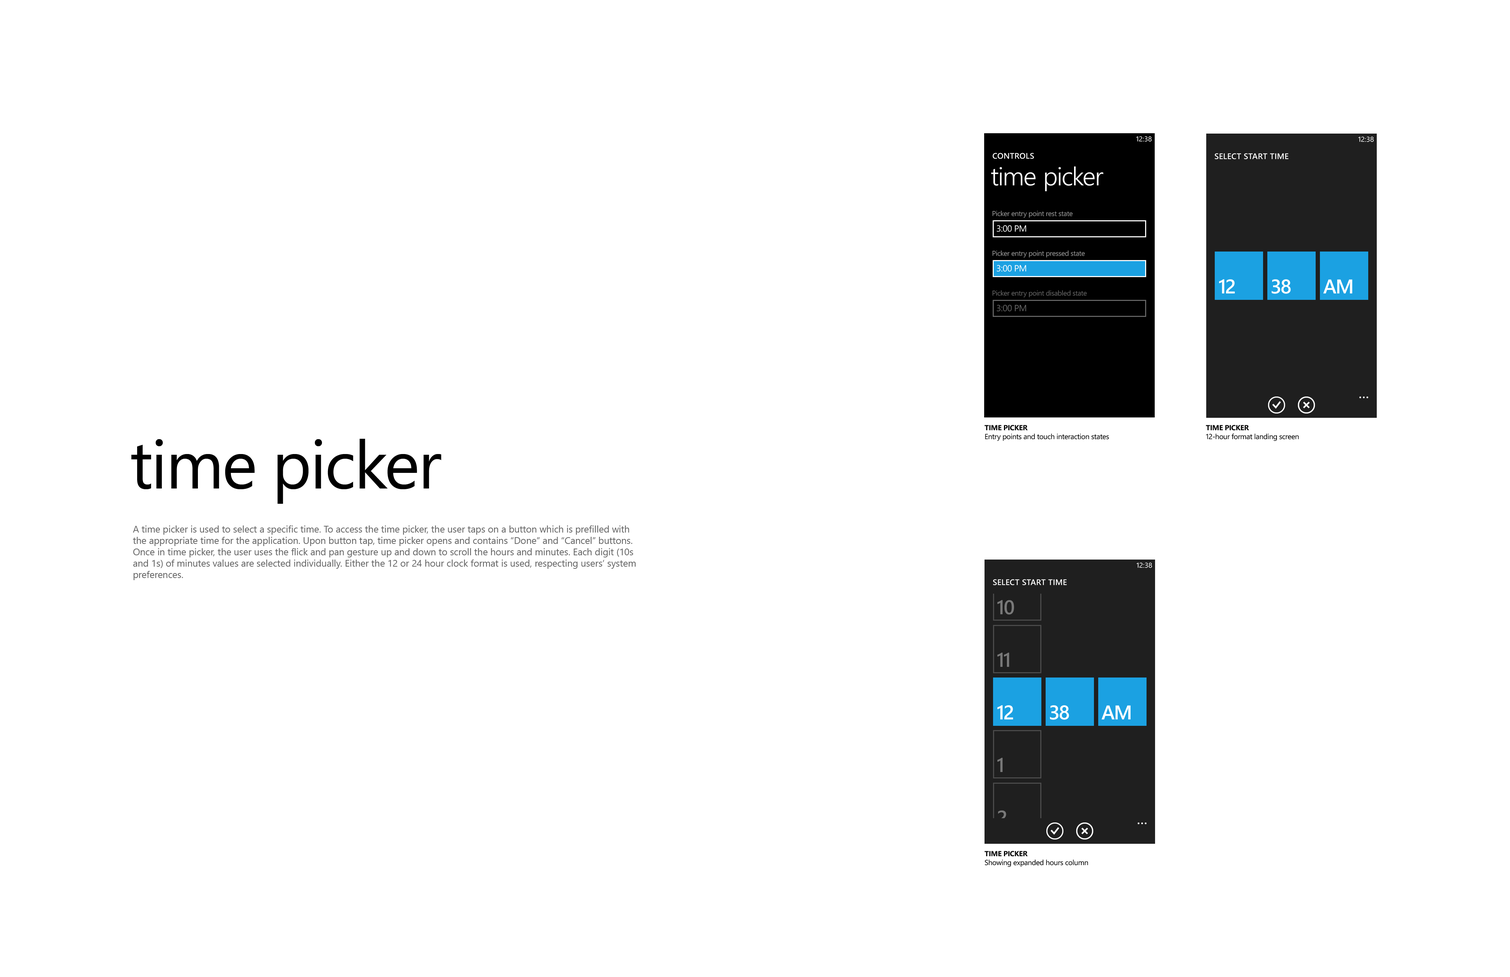
<style>
.page{position:relative;width:1510px;height:977px;background:#ffffff}
.page>*{position:absolute;margin:0}
.t1{font:7.1px "SegoeWP";color:#ffffff}
.t2{font:8.1px "SegoeWP-Semibold";letter-spacing:0.025em;color:#ffffff;text-transform:uppercase}
.t3{font:25.6px "SegoeWP-SemiLight";letter-spacing:-0.01em;color:#ffffff}
.t4{font:7.1px "SegoeWP";letter-spacing:-0.025em;color:#999999}
.t5{font:9px "SegoeWP";letter-spacing:-0.025em;color:#ffffff}
.t6{font:19.9px "SegoeWP-Semibold";letter-spacing:-0.025em;color:#ffffff}
.t7{font:7.1px "SegoeWP";letter-spacing:-0.025em;color:#666666}
.t8{font:9px "SegoeWP";letter-spacing:-0.025em;color:#666666}
.t9{font:7.4px "SegoeWP";letter-spacing:-0.025em;color:#000000}
.t10{font:7.4px "SegoeWP-Bold";letter-spacing:-0.025em;color:#000000;text-transform:uppercase}
.t11{font:67.3px "SegoeUI";letter-spacing:-0.025em;color:#000000}
.t12{font:9.5px "SegoeUI";color:#666666}
.t13{font:19.9px "SegoeWP-Semibold";letter-spacing:-0.025em;color:#797979}
.t14{font:19.9px "SegoeWP-Semibold";letter-spacing:-0.025em}
</style>
<div class="page">
<p class="t1" style="left:1136px;top:136px;width:16px;height:6px">12:38</p>
<p class="t1" style="left:1358px;top:136px;width:16px;height:6px">12:38</p>
<p class="t2" style="left:993px;top:153px;width:41px;height:6px">controls</p>
<p class="t2" style="left:1215px;top:153px;width:74px;height:6px">SELECT START time</p>
<p class="t3" style="left:991px;top:166px;width:112px;height:25px">time picker</p>
<p class="t4" style="left:992px;top:211px;width:81px;height:7px">Picker entry point rest state</p>
<p class="t5" style="left:997px;top:225px;width:29px;height:7px">3:00 PM</p>
<p class="t4" style="left:992px;top:250px;width:93px;height:8px">Picker entry point pressed state</p>
<p class="t5" style="left:997px;top:265px;width:29px;height:7px">3:00 PM</p>
<p class="t6" style="left:1219px;top:279px;width:16px;height:14px">12</p>
<p class="t6" style="left:1271px;top:279px;width:20px;height:15px">38</p>
<p class="t6" style="left:1323px;top:279px;width:29px;height:14px">AM</p>
<p class="t7" style="left:992px;top:290px;width:95px;height:7px">Picker entry point disabled state</p>
<p class="t8" style="left:997px;top:305px;width:29px;height:7px">3:00 PM</p>
<p class="t9" style="left:984px;top:425px;width:125px;height:16px"><span class="t10">time picker<br></span>Entry points and touch interaction states</p>
<p class="t9" style="left:1206px;top:425px;width:93px;height:16px"><span class="t10">time picker<br></span>12-hour format landing screen</p>
<p class="t11" style="left:131px;top:439px;width:310px;height:65px">time picker</p>
<p class="t12" style="left:133px;top:525px;width:503px;height:55px">A time picker is used to select a specific time. To access the time picker, the user taps on a button which is prefilled with the appropriate time for the application. Upon button tap, time picker opens and contains “Done” and “Cancel” buttons. Once in time picker, the user uses the flick and pan gesture up and down to scroll the hours and minutes. Each digit (10s and 1s) of minutes values are selected individually. Either the 12 or 24 hour clock format is used, respecting users’ system preferences.</p>
<p class="t1" style="left:1136px;top:562px;width:16px;height:6px">12:38</p>
<p class="t2" style="left:993px;top:579px;width:74px;height:6px">SELECT START time</p>
<p class="t13" style="left:997px;top:600px;width:17px;height:15px">10</p>
<p class="t13" style="left:997px;top:653px;width:12px;height:14px">11</p>
<p class="t6" style="left:997px;top:705px;width:16px;height:14px">12</p>
<p class="t6" style="left:1050px;top:705px;width:19px;height:15px">38</p>
<p class="t6" style="left:1101px;top:705px;width:29px;height:14px">AM</p>
<p class="t13" style="left:997px;top:758px;width:6px;height:14px">1</p>
<p class="t14" style="left:997px;top:810px;width:9px;height:15px">2</p>
<p class="t9" style="left:984px;top:851px;width:104px;height:16px"><span class="t10">time picker<br></span>Showing expanded hours column</p>
</div>
